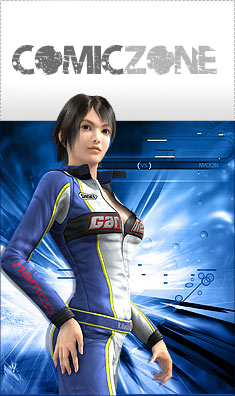
<style>
.page{position:relative;width:235px;height:396px}
.page>*{position:absolute;margin:0}
.t1{font:32px "tramyad-Semi-expandedBold";color:#6c6c6c}
.t2{font:32px "tramyad-Semi-expandedBold";color:#b4b4b4}
</style>
<div class="page">
<p class="t1" style="left:12px;top:45px;width:205px;height:30px">COMIC<span class="t2">ZONE</span></p>
</div>
